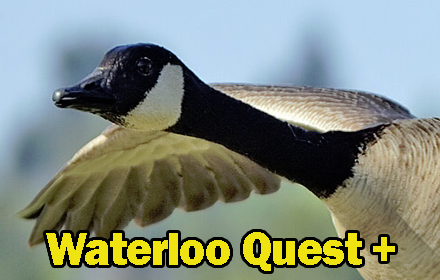
<style>
.page{position:relative;width:440px;height:280px}
.page>*{position:absolute;margin:0}
.t1{font:48px "FranklinGothic-Heavy";letter-spacing:-0.03em;color:#f0e312;scale:0.95 1}
</style>
<div class="page">
<p class="t1" style="left:46px;top:232px;width:349px;height:39px">Waterloo Quest +</p>
</div>
